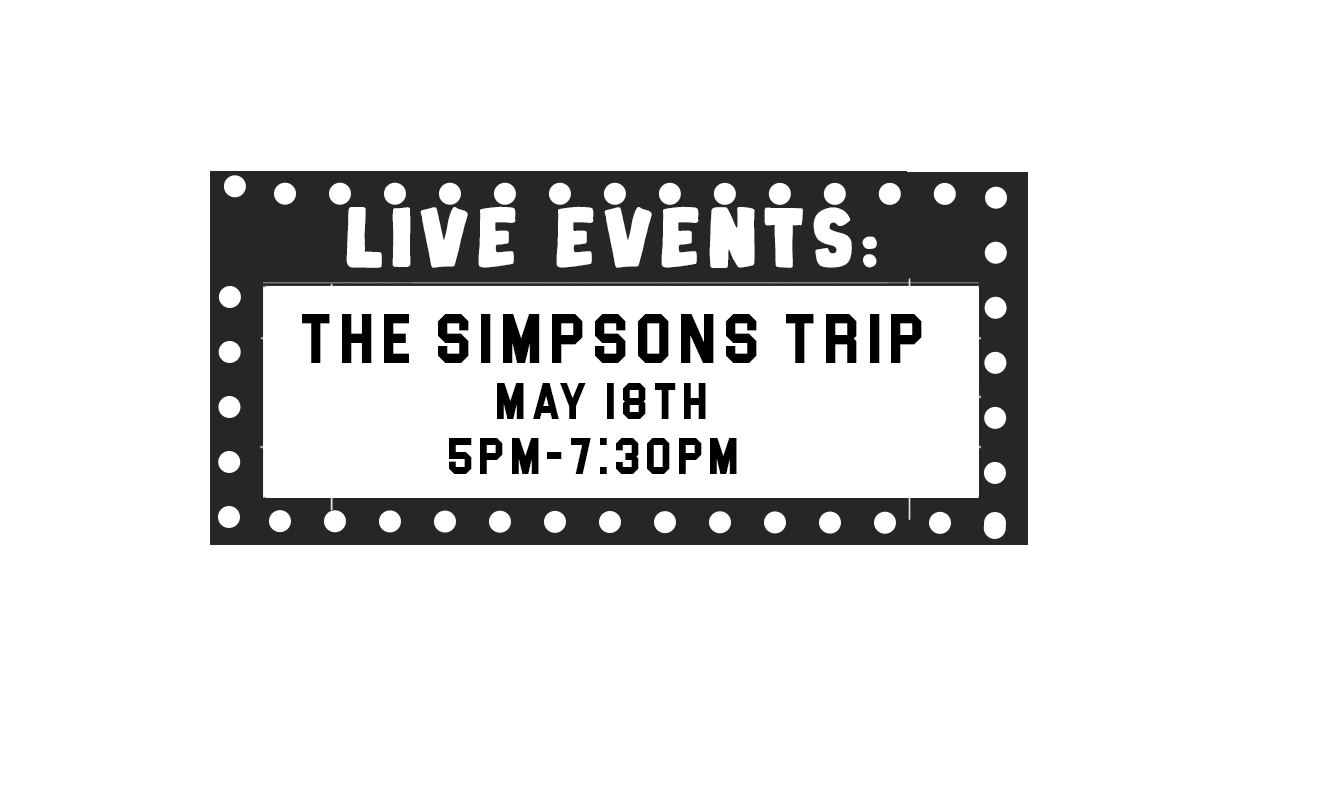
<style>
.page{position:relative;width:1327px;height:792px;background:#ffffff}
.page>*{position:absolute;margin:0}
.t1{font:71.3px "BabyParty";letter-spacing:0.1em;color:#ffffff;text-transform:uppercase}
.t2{font:72.2px "Blockletter";letter-spacing:0.1em;color:#000000;text-transform:uppercase}
.t3{font:52.8px "Blockletter";letter-spacing:0.1em;color:#000000;text-transform:uppercase}
</style>
<div class="page">
<p class="t1" style="left:346px;top:206px;width:531px;height:62px">LIVE EVENTS:</p>
<p class="t2" style="left:302px;top:314px;width:620px;height:49px">the Simpsons Trip</p>
<p class="t3" style="left:497px;top:383px;width:209px;height:36px">May 18th</p>
<p class="t3" style="left:449px;top:438px;width:288px;height:36px">5pm-7:30pm</p>
</div>
